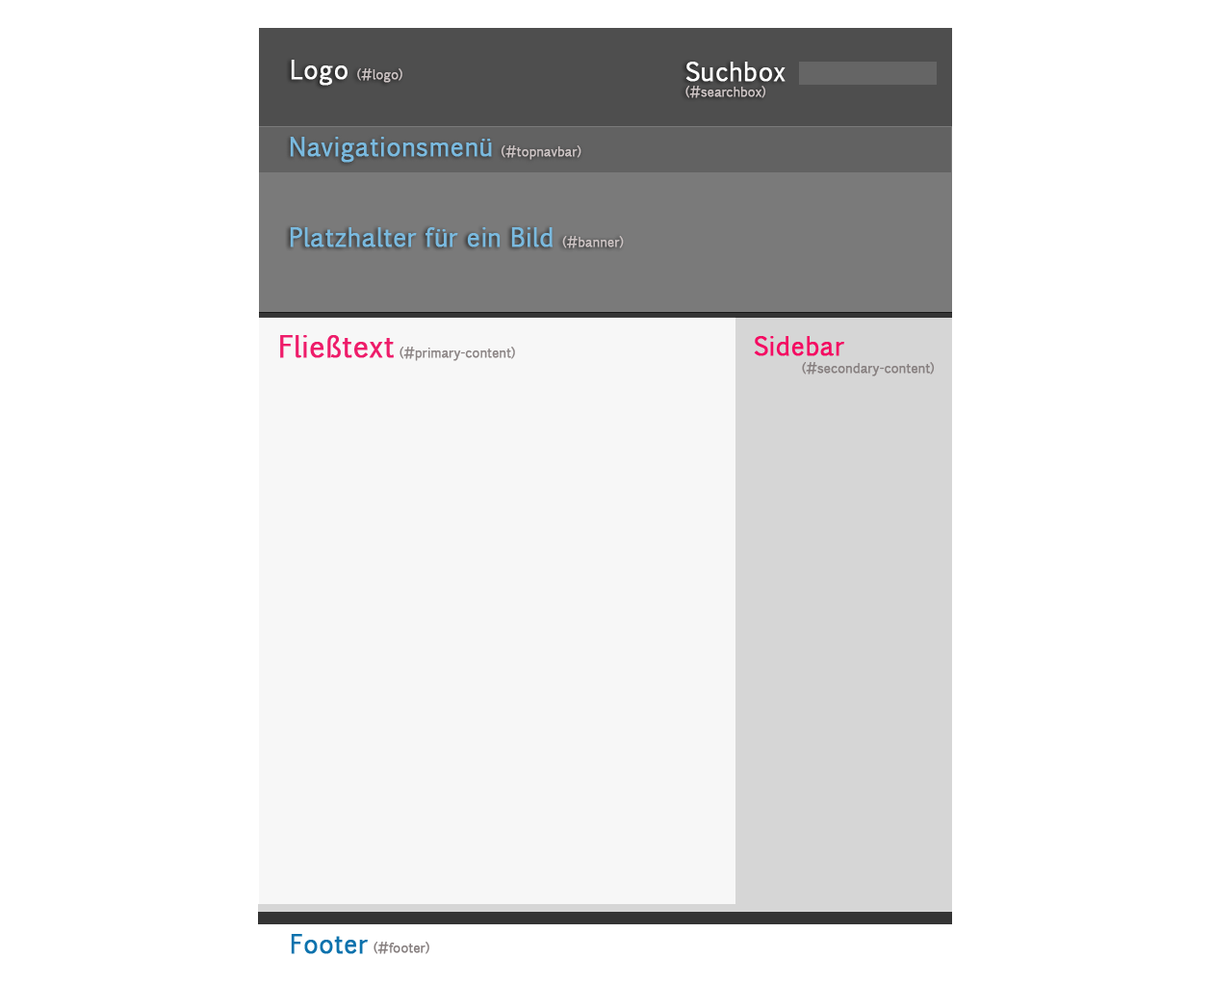
<style>
.page{position:relative;width:1212px;height:984px;background:#ffffff}
.page>*{position:absolute;margin:0}
.t1{font:12.8px "Pigiarniq";letter-spacing:0.005em;color:#cdc4c4;font-weight:bold;scale:0.95 1}
.t2{font:25.7px "Pigiarniq";letter-spacing:0.005em;color:#ffffff;font-weight:bold;scale:0.95 1}
.t3{font:25.7px "Pigiarniq";letter-spacing:0.005em;color:#7abadf;font-weight:bold;scale:0.95 1}
.t4{font:29.5px "Pigiarniq";letter-spacing:0.005em;color:#f40b62;font-weight:bold;scale:0.95 1}
.t5{font:25.7px "Pigiarniq";letter-spacing:0.005em;color:#f40b62;font-weight:bold;scale:0.95 1}
.t6{font:12.8px "Pigiarniq";letter-spacing:0.005em;color:#878080;font-weight:bold;scale:0.95 1}
.t7{font:25.7px "Pigiarniq";letter-spacing:0.005em;color:#0c72ad;font-weight:bold;scale:0.95 1}
</style>
<div class="page">
<p class="t1" style="left:291px;top:60px;width:111px;height:26px"><span class="t2">Logo </span>(#logo)</p>
<p class="t1" style="left:685px;top:62px;width:101px;height:36px"><span class="t2">Suchbox<br></span>(#searchbox)</p>
<p class="t3" style="left:290px;top:137px;width:291px;height:26px">Navigationsmenü <span class="t1">(#topnavbar)</span></p>
<p class="t3" style="left:290px;top:227px;width:334px;height:21px">Platzhalter für ein Bild <span class="t1">(#banner)</span></p>
<p class="t4" style="left:280px;top:335px;width:114px;height:23px">Fließtext</p>
<p class="t5" style="left:754px;top:336px;width:90px;height:20px">Sidebar</p>
<p class="t6" style="left:400px;top:347px;width:115px;height:14px">(#primary-content)</p>
<p class="t6" style="left:802px;top:362px;width:133px;height:14px">(#secondary-content)</p>
<p class="t7" style="left:291px;top:934px;width:77px;height:20px">Footer</p>
<p class="t6" style="left:374px;top:941px;width:55px;height:13px">(#footer)</p>
</div>
